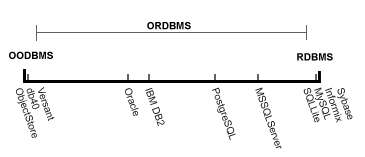
<style>
.page{position:relative;width:365px;height:157px;background:#ffffff}
.page>*{position:absolute;margin:0}
.t1{font:10px "Arial-BoldMT";color:#000000}
.t2{font:10px "ArialMT";color:#202020}
.t3{font:10px "ArialMT"}
</style>
<div class="page">
<p class="t1" style="left:147px;top:22px;width:44px;height:8px">ORDBMS</p>
<p class="t1" style="left:9px;top:51px;width:44px;height:8px">OODBMS</p>
<p class="t1" style="left:297px;top:53px;width:36px;height:8px">RDBMS</p>
<p class="t2" style="left:16px;top:88px;width:21px;height:50px;rotate:70deg">ObjectStore</p>
<p class="t3" style="left:26px;top:88px;width:14px;height:21px;rotate:70deg">db40</p>
<p class="t2" style="left:38px;top:86px;width:17px;height:35px;rotate:70deg">Versant</p>
<p class="t2" style="left:125px;top:88px;width:14px;height:28px;rotate:70deg">Oracle</p>
<p class="t2" style="left:145px;top:87px;width:20px;height:40px;rotate:70deg">IBM DB2</p>
<p class="t2" style="left:212px;top:87px;width:24px;height:54px;rotate:70deg">PostgreSQL</p>
<p class="t2" style="left:255px;top:87px;width:27px;height:62px;rotate:70deg">MSSQLServer</p>
<p class="t3" style="left:303px;top:88px;width:17px;height:35px;rotate:70deg">SQLLite</p>
<p class="t2" style="left:314px;top:87px;width:17px;height:34px;rotate:70deg">MySQL</p>
<p class="t2" style="left:325px;top:87px;width:17px;height:36px;rotate:70deg">Informix</p>
<p class="t2" style="left:337px;top:88px;width:16px;height:32px;rotate:70deg">Sybase</p>
</div>
